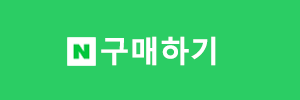
<style>
.page{position:relative;width:300px;height:100px;background:#2bcd64}
.page>*{position:absolute;margin:0}
.t1{font:30px "MalgunGothicBold";color:#ffffff}
</style>
<div class="page">
<p class="t1" style="left:101px;top:36px;width:115px;height:30px">구매하기</p>
</div>
